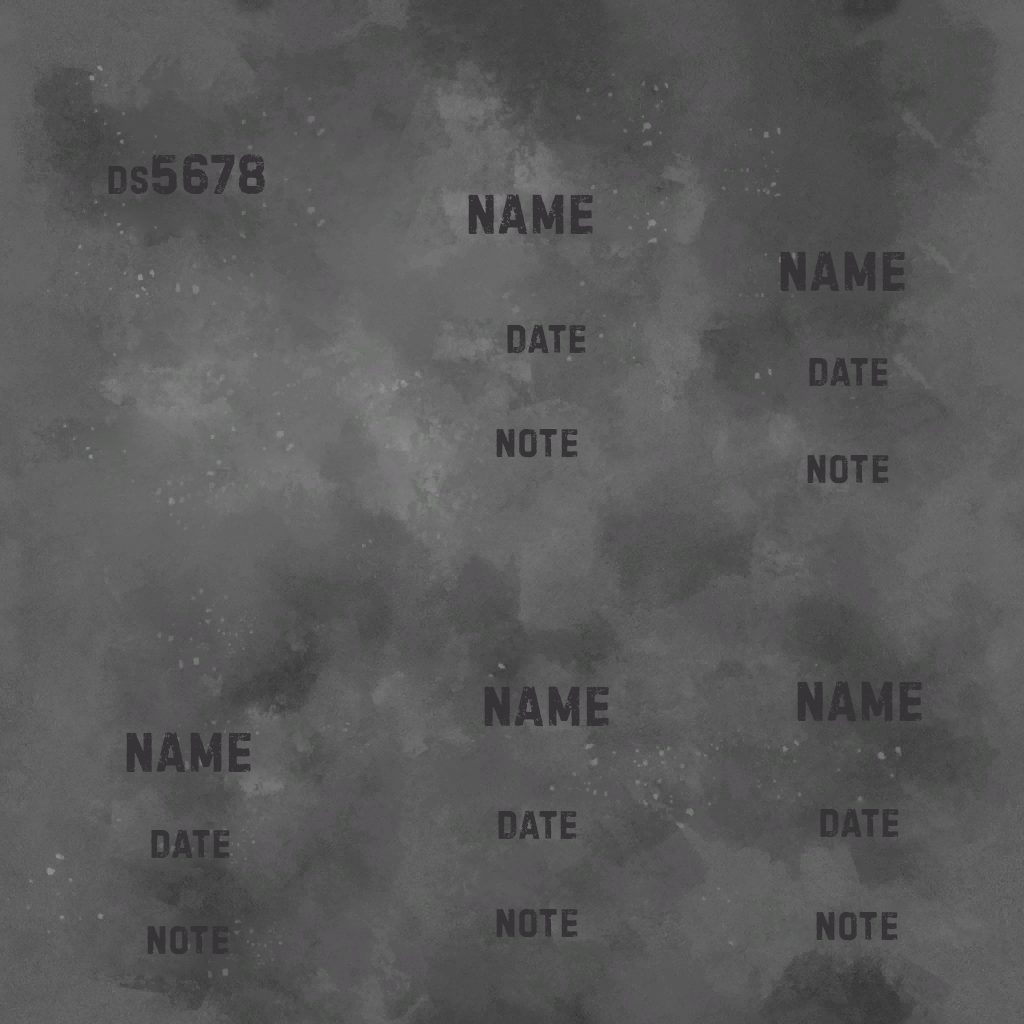
<style>
.page{position:relative;width:1024px;height:1024px}
.page>*{position:absolute;margin:0}
.t1{font:60.3px "HandelsonSix_CYR-Six";color:#363436}
.t2{font:43px "HandelsonSix_CYR-Six";color:#363436}
</style>
<div class="page">
<p class="t1" style="left:108px;top:154px;width:157px;height:41px"><span class="t2">ds</span>5678</p>
<p class="t1" style="left:468px;top:194px;width:125px;height:41px">NAME</p>
<p class="t1" style="left:780px;top:251px;width:125px;height:41px">NAME</p>
<p class="t2" style="left:507px;top:324px;width:79px;height:30px">date</p>
<p class="t2" style="left:809px;top:357px;width:79px;height:30px">date</p>
<p class="t2" style="left:496px;top:428px;width:82px;height:30px">note</p>
<p class="t2" style="left:807px;top:454px;width:82px;height:30px">note</p>
<p class="t1" style="left:484px;top:686px;width:125px;height:41px">NAME</p>
<p class="t1" style="left:797px;top:681px;width:125px;height:41px">NAME</p>
<p class="t1" style="left:126px;top:732px;width:125px;height:41px">NAME</p>
<p class="t2" style="left:820px;top:808px;width:79px;height:30px">date</p>
<p class="t2" style="left:498px;top:810px;width:79px;height:30px">date</p>
<p class="t2" style="left:151px;top:829px;width:79px;height:30px">date</p>
<p class="t2" style="left:496px;top:908px;width:82px;height:30px">note</p>
<p class="t2" style="left:816px;top:911px;width:82px;height:30px">note</p>
<p class="t2" style="left:147px;top:925px;width:82px;height:30px">note</p>
</div>
